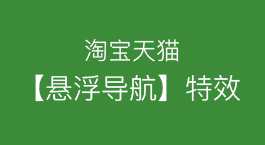
<style>
.page{position:relative;width:265px;height:145px;background:#3c8b38}
.page>*{position:absolute;margin:0}
.t1{font:24px "PingFang-SC-Regular";color:#ffffff}
.t2{font:28px "PingFang-SC-Regular";color:#ffffff}
</style>
<div class="page">
<p class="t1" style="left:85px;top:39px;width:94px;height:23px">淘宝天猫</p>
<p class="t2" style="left:35px;top:74px;width:205px;height:28px">【悬浮导航】特效</p>
</div>
